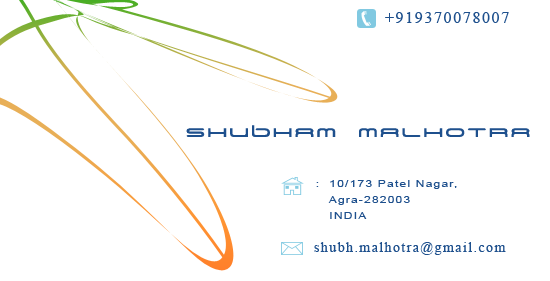
<style>
.page{position:relative;width:550px;height:281px;background:#ffffff}
.page>*{position:absolute;margin:0}
.t1{font:16px "TimesNewRomanPSMT";letter-spacing:0.1em;color:#1e508d}
.t2{font:30px "BNYear2000";letter-spacing:0.1em;color:#1e508d;scale:1.1 1}
.t3{font:10px/16px "ArialMT";letter-spacing:0.1em;color:#1e508d;scale:1.2 1}
.t4{font:14px "TimesNewRomanPSMT";letter-spacing:0.1em;color:#1e508d}
</style>
<div class="page">
<p class="t1" style="left:385px;top:12px;width:124px;height:11px">+919370078007</p>
<p class="t2" style="left:186px;top:125px;width:344px;height:12px">SHUBHAM MALHOTRA</p>
<p class="t3" style="left:316px;top:180px;width:141px;height:39px">:  10/173 Patel Nagar,<br>   Agra-282003<br>   INDIA</p>
<p class="t4" style="left:314px;top:242px;width:192px;height:13px">shubh.malhotra@gmail.com</p>
</div>
